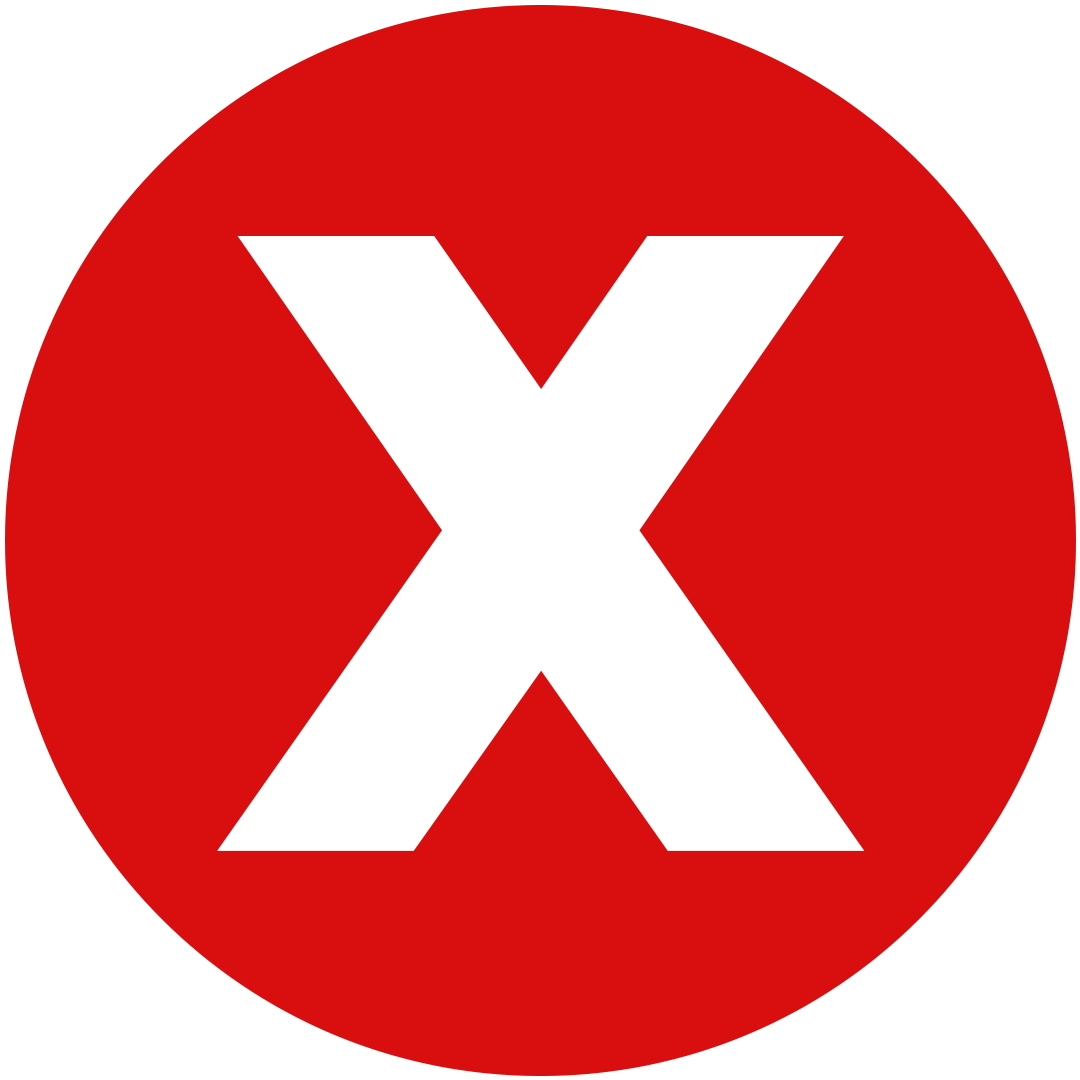
<style>
.page{position:relative;width:1080px;height:1080px;background:#d90e0e}
.page>*{position:absolute;margin:0}
.t1{font:817.6px "BigJohn";color:#ffffff}
</style>
<div class="page">
<p class="t1" style="left:217px;top:236px;width:648px;height:615px">X</p>
</div>
